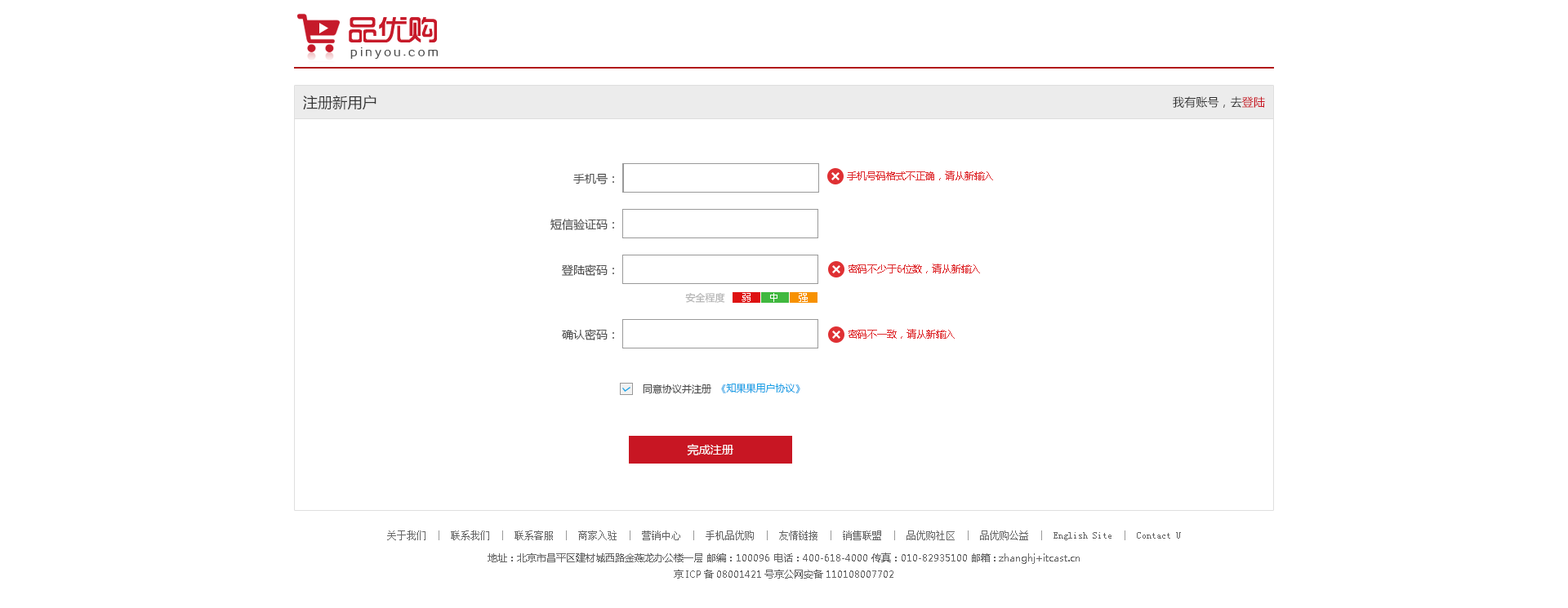
<style>
.page{position:relative;width:1568px;height:608px;background:#ffffff}
.page>*{position:absolute;margin:0}
.t1{font:14.7px "MicrosoftYaHei";letter-spacing:0.01em;color:#333333}
.t2{font:11.4px "MicrosoftYaHei";letter-spacing:0.01em;color:#333333}
.t3{font:11.4px "MicrosoftYaHei";letter-spacing:0.01em;color:#c81623}
.t4{font:11.4px "MicrosoftYaHei";color:#4d4d4d}
.t5{font:9.8px "MicrosoftYaHei";color:#df3033}
.t6{font:9.8px "MicrosoftYaHei";color:#b3b3b3}
.t7{font:9.8px "SimSun";color:#ffffff}
.t8{font:9.8px "MicrosoftYaHei";color:#4d4d4d}
.t9{font:9.8px "MicrosoftYaHei";color:#1ba1e6}
.t10{font:11.4px "MicrosoftYaHei";letter-spacing:0.01em;color:#ffffff}
.t11{font:9.8px/16.3px "MicrosoftYaHei";color:#666666}
.t12{font:9.8px/22.9px "SimSun";color:#666666}
.t13{font:9.8px/22.9px "SimSun";color:#999999}
.t14{font:9.8px/10.6px "MicrosoftYaHei";color:#666666}
</style>
<div class="page">
<p class="t1" style="left:303px;top:95px;width:73px;height:15px">注册新用户</p>
<p class="t2" style="left:1173px;top:96px;width:92px;height:12px">我有账号，去<span class="t3">登陆</span></p>
<p class="t4" style="left:573px;top:173px;width:41px;height:12px">手机号：</p>
<p class="t5" style="left:847px;top:171px;width:146px;height:9px">手机号码格式不正确，请从新输入</p>
<p class="t4" style="left:550px;top:219px;width:64px;height:11px">短信验证码：</p>
<p class="t4" style="left:562px;top:265px;width:52px;height:11px">登陆密码：</p>
<p class="t5" style="left:849px;top:264px;width:131px;height:10px">密码不少于6位数，请从新输入</p>
<p class="t6" style="left:685px;top:292px;width:40px;height:11px">安全程度</p>
<p class="t7" style="left:742px;top:293px;width:9px;height:9px">弱</p>
<p class="t7" style="left:770px;top:293px;width:7px;height:9px">中</p>
<p class="t7" style="left:799px;top:293px;width:9px;height:9px">强</p>
<p class="t4" style="left:562px;top:329px;width:52px;height:12px">确认密码：</p>
<p class="t5" style="left:849px;top:329px;width:106px;height:10px">密码不一致，请从新输入</p>
<p class="t8" style="left:643px;top:385px;width:68px;height:9px">同意协议并注册</p>
<p class="t9" style="left:721px;top:384px;width:79px;height:10px">《知果果用户协议》</p>
<p class="t10" style="left:687px;top:444px;width:46px;height:12px">完成注册</p>
<p class="t11" style="left:387px;top:531px;width:794px;height:48px;text-align:center"><span class="t12">关于我们  </span><span class="t13">|</span><span class="t12">  联系我们  </span><span class="t13">|</span><span class="t12">  联系客服  </span><span class="t13">|</span><span class="t12">  商家入驻  </span><span class="t13">|</span><span class="t12">  营销中心  </span><span class="t13">|</span><span class="t12">  手机品优购  </span><span class="t13">|</span><span class="t12">  友情链接  </span><span class="t13">|</span><span class="t12">  销售联盟  </span><span class="t13">|</span><span class="t12">  品优购社区  </span><span class="t13">|</span><span class="t12">  品优购公益  </span><span class="t13">|</span><span class="t12">  English Site  </span><span class="t13">|</span><span class="t12">  Contact U<br></span>地址：北京市昌平区建材城西路金燕龙办公楼一层 邮编：100096 电话：400-618-4000 传真：010-82935100 邮箱: zhanghj+itcast.cn<br><span class="t14">京ICP备08001421号京公网安备110108007702</span></p>
</div>
